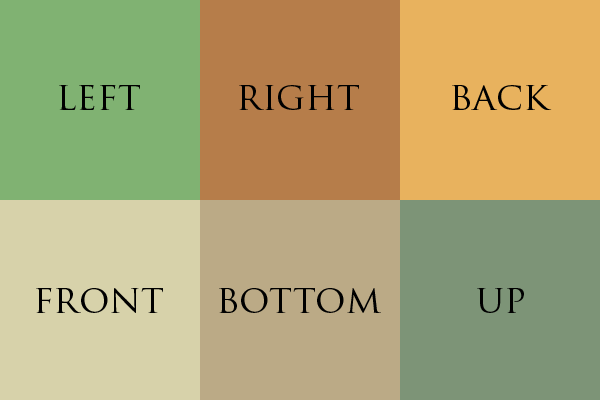
<style>
.page{position:relative;width:600px;height:400px}
.page>*{position:absolute;margin:0}
.t1{font:38.1px "TrajanPro-Regular";color:#000000}
</style>
<div class="page">
<p class="t1" style="left:59px;top:85px;width:81px;height:25px">left</p>
<p class="t1" style="left:239px;top:85px;width:120px;height:25px">right</p>
<p class="t1" style="left:452px;top:85px;width:100px;height:25px">back</p>
<p class="t1" style="left:36px;top:288px;width:127px;height:25px">front</p>
<p class="t1" style="left:219px;top:288px;width:162px;height:25px">bottom</p>
<p class="t1" style="left:477px;top:288px;width:47px;height:25px">up</p>
</div>
